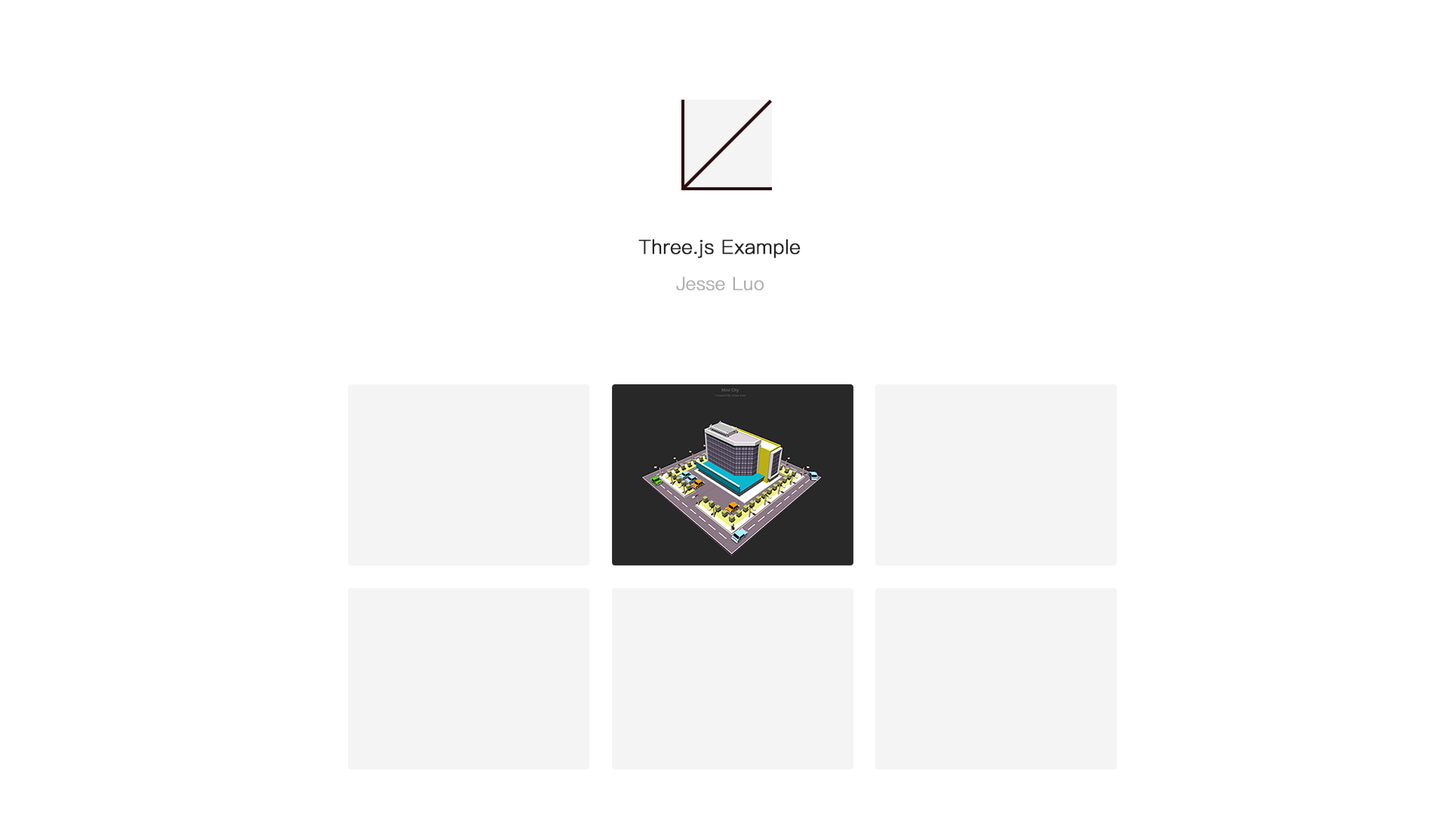
<style>
.page{position:relative;width:1439px;height:829px;background:#ffffff}
.page>*{position:absolute;margin:0}
.t1{font:19.6px "PingFang-SC-Regular";color:#232323;font-weight:bold}
.t2{font:18.1px "PingFang-SC-Regular";color:#b0afb0;font-weight:bold}
</style>
<div class="page">
<p class="t1" style="left:638px;top:239px;width:163px;height:19px">Three.js Example</p>
<p class="t2" style="left:676px;top:276px;width:88px;height:15px">Jesse Luo</p>
</div>
